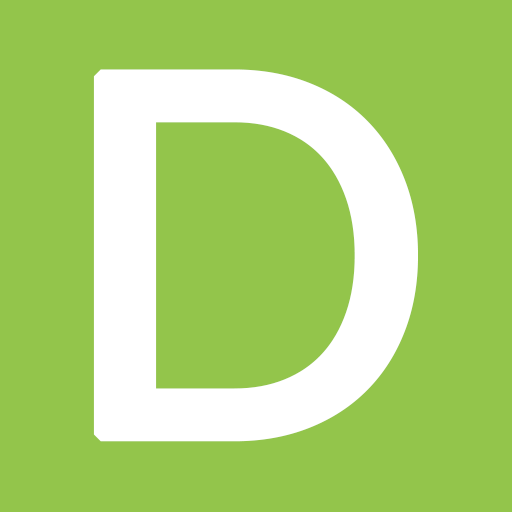
<style>
.page{position:relative;width:512px;height:512px;background:#93c54b}
.page>*{position:absolute;margin:0}
.t1{font:500px "Lato-Regular";color:#ffffff;font-weight:bold}
</style>
<div class="page">
<p class="t1" style="left:93px;top:69px;width:325px;height:373px">D</p>
</div>
